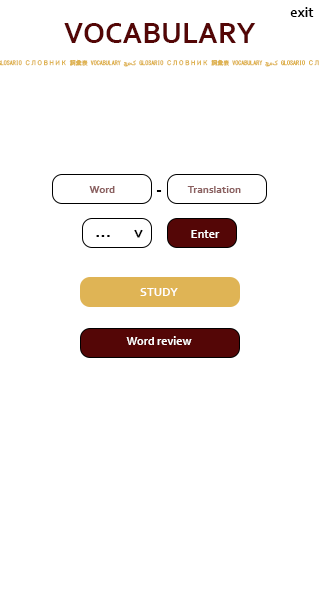
<style>
.page{position:relative;width:320px;height:600px;background:#ffffff}
.page>*{position:absolute;margin:0}
.t1{font:14px "Corbel-Bold";color:#000000}
.t2{font:30px "Corbel-Bold";color:#540606}
.t3{font:11px "Corbel-Bold";color:#8b6060}
.t4{font:18px "Corbel-Bold";color:#000000}
.t5{font:12px "Corbel-Bold";color:#ffffff}
</style>
<div class="page">
<p class="t1" style="left:290px;top:7px;width:24px;height:10px">exit</p>
<p class="t2" style="left:64px;top:23px;width:192px;height:20px">VOCABULARY</p>
<p class="t3" style="left:89px;top:186px;width:26px;height:7px">Word</p>
<p class="t4" style="left:156px;top:190px;width:6px;height:2px">-</p>
<p class="t3" style="left:187px;top:186px;width:54px;height:7px">Translation</p>
<p class="t4" style="left:134px;top:229px;width:9px;height:9px;rotate:90deg">&gt;</p>
<p class="t5" style="left:191px;top:230px;width:29px;height:8px">Enter</p>
<p class="t4" style="left:96px;top:235px;width:14px;height:2px">...</p>
<p class="t5" style="left:140px;top:288px;width:38px;height:8px">STUDY</p>
<p class="t5" style="left:126px;top:336px;width:66px;height:9px">Word review</p>
</div>
